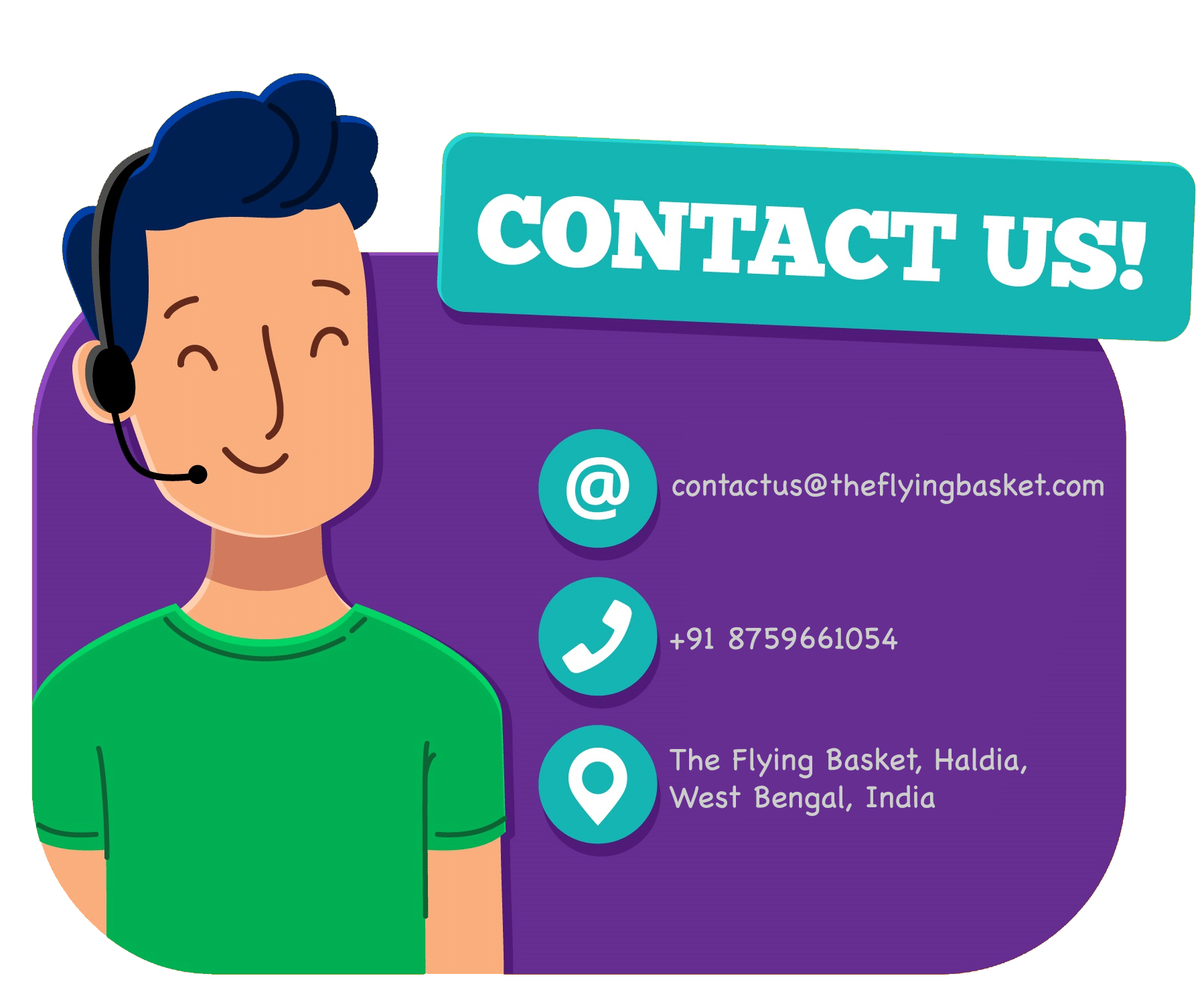
<style>
.page{position:relative;width:1204px;height:990px;background:#662e91}
.page>*{position:absolute;margin:0}
.t1{font:31.2px "Chalkboard";color:#cdcdcd}
.t2{font:31.2px/37.6px "Chalkboard";color:#cdcdcd}
</style>
<div class="page">
<p class="t1" style="left:672px;top:472px;width:432px;height:32px">contactus@theflyingbasket.com</p>
<p class="t1" style="left:670px;top:627px;width:228px;height:23px">+91 8759661054</p>
<p class="t2" style="left:669px;top:747px;width:358px;height:69px">The Flying Basket, Haldia,<br>West Bengal, India</p>
</div>
